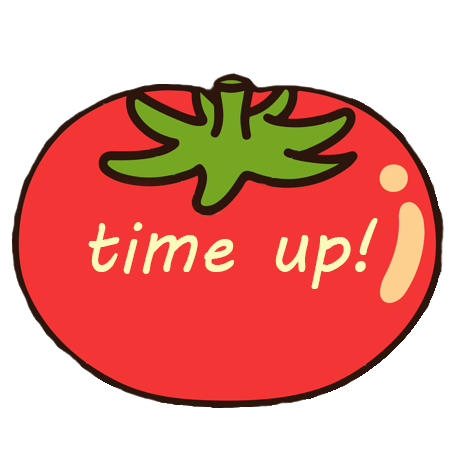
<style>
.page{position:relative;width:450px;height:468px;background:#ffffff}
.page>*{position:absolute;margin:0}
.t1{font:76.2px "MVBoli";color:#fcfabb;scale:0.94 1}
</style>
<div class="page">
<p class="t1" style="left:88px;top:218px;width:290px;height:71px">time up!</p>
</div>
